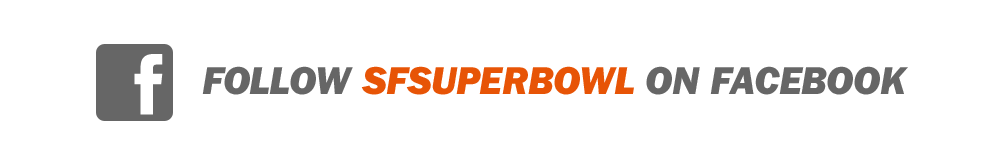
<style>
.page{position:relative;width:996px;height:157px;background:#ffffff}
.page>*{position:absolute;margin:0}
.t1{font:40px "FranklinGothic-HeavyItal";letter-spacing:-0.01em;color:#e75406;text-transform:uppercase}
.t2{font:40px "FranklinGothic-HeavyItal";letter-spacing:-0.01em;color:#666666;text-transform:uppercase}
</style>
<div class="page">
<p class="t1" style="left:202px;top:66px;width:706px;height:29px"><span class="t2">Follow </span>sfsuperbowl <span class="t2">on facebook</span></p>
</div>
